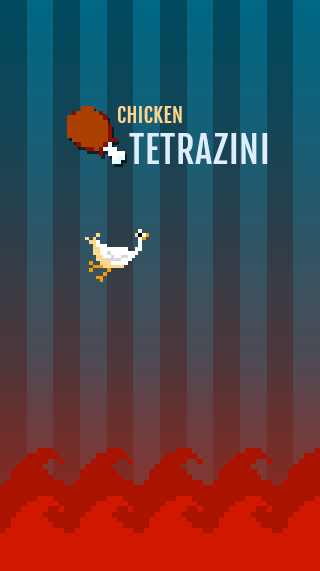
<style>
.page{position:relative;width:320px;height:571px}
.page>*{position:absolute;margin:0}
.t1{font:20px "FjallaOne-Regular";letter-spacing:0.02em;color:#ffd690}
.t2{font:36px "FjallaOne-Regular";letter-spacing:0.02em;color:#ddeeff}
</style>
<div class="page">
<p class="t1" style="left:118px;top:106px;width:64px;height:17px">CHICKEN</p>
<p class="t2" style="left:129px;top:133px;width:139px;height:31px">TETRAZINI</p>
</div>
